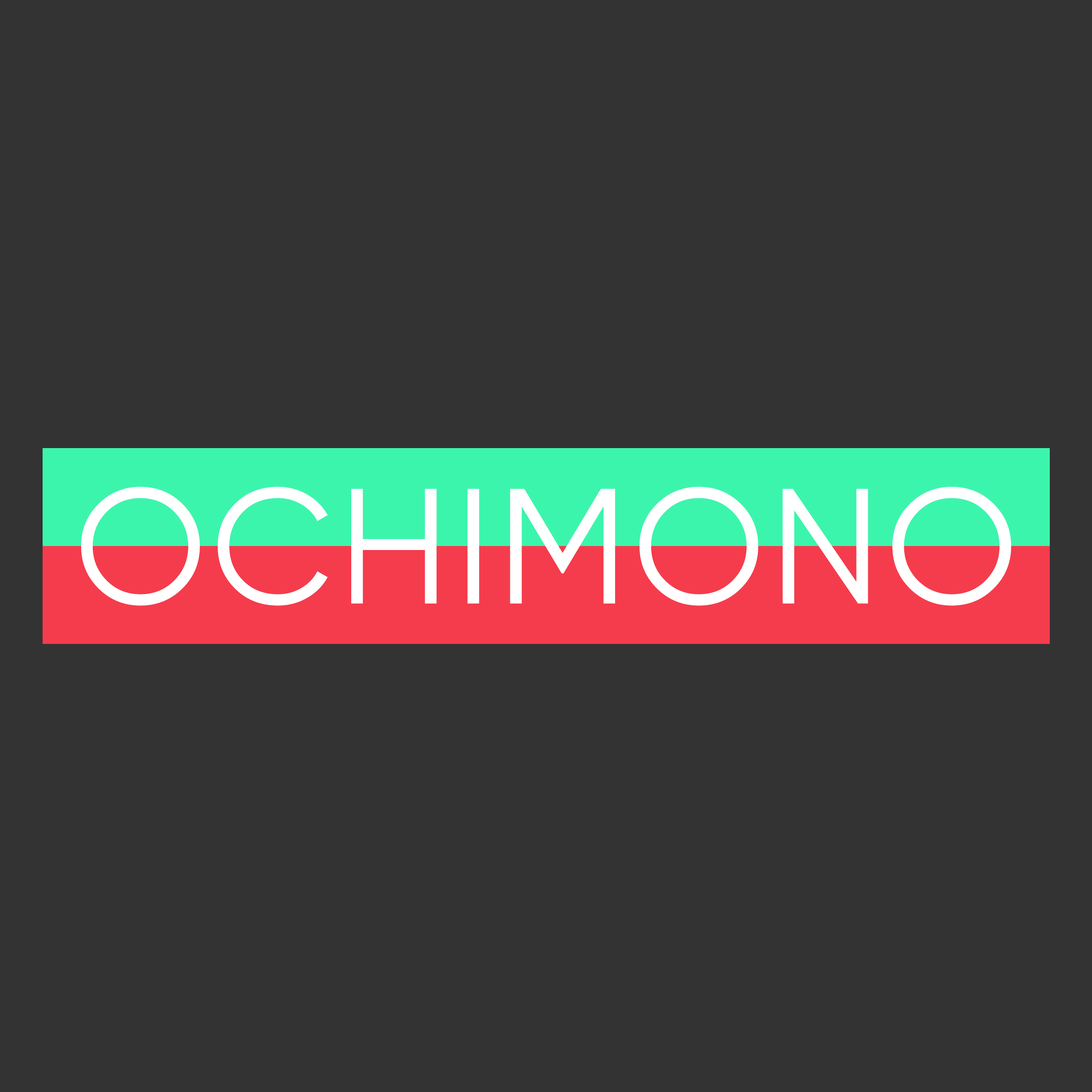
<style>
.page{position:relative;width:1092px;height:1092px;background:#333333}
.page>*{position:absolute;margin:0}
.t1{font:163.8px "Gilroy-Regular";letter-spacing:0.03em;color:#ffffff}
</style>
<div class="page">
<p class="t1" style="left:81px;top:487px;width:930px;height:119px">OCHIMONO</p>
</div>
